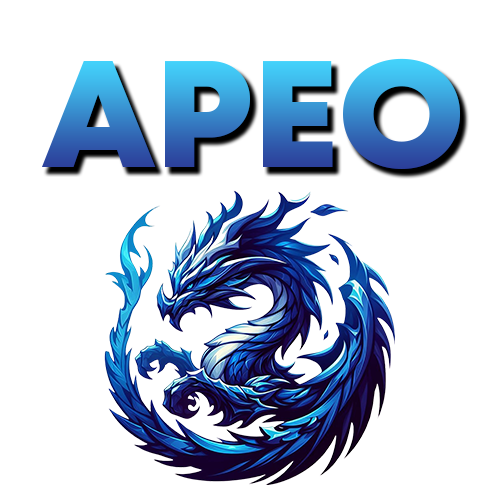
<style>
.page{position:relative;width:500px;height:500px;background:#ffffff}
.page>*{position:absolute;margin:0}
.t1{font:152.1px "Mont-HeavyDEMO"}
</style>
<div class="page">
<p class="t1" style="left:42px;top:58px;width:419px;height:111px">APEO</p>
</div>
